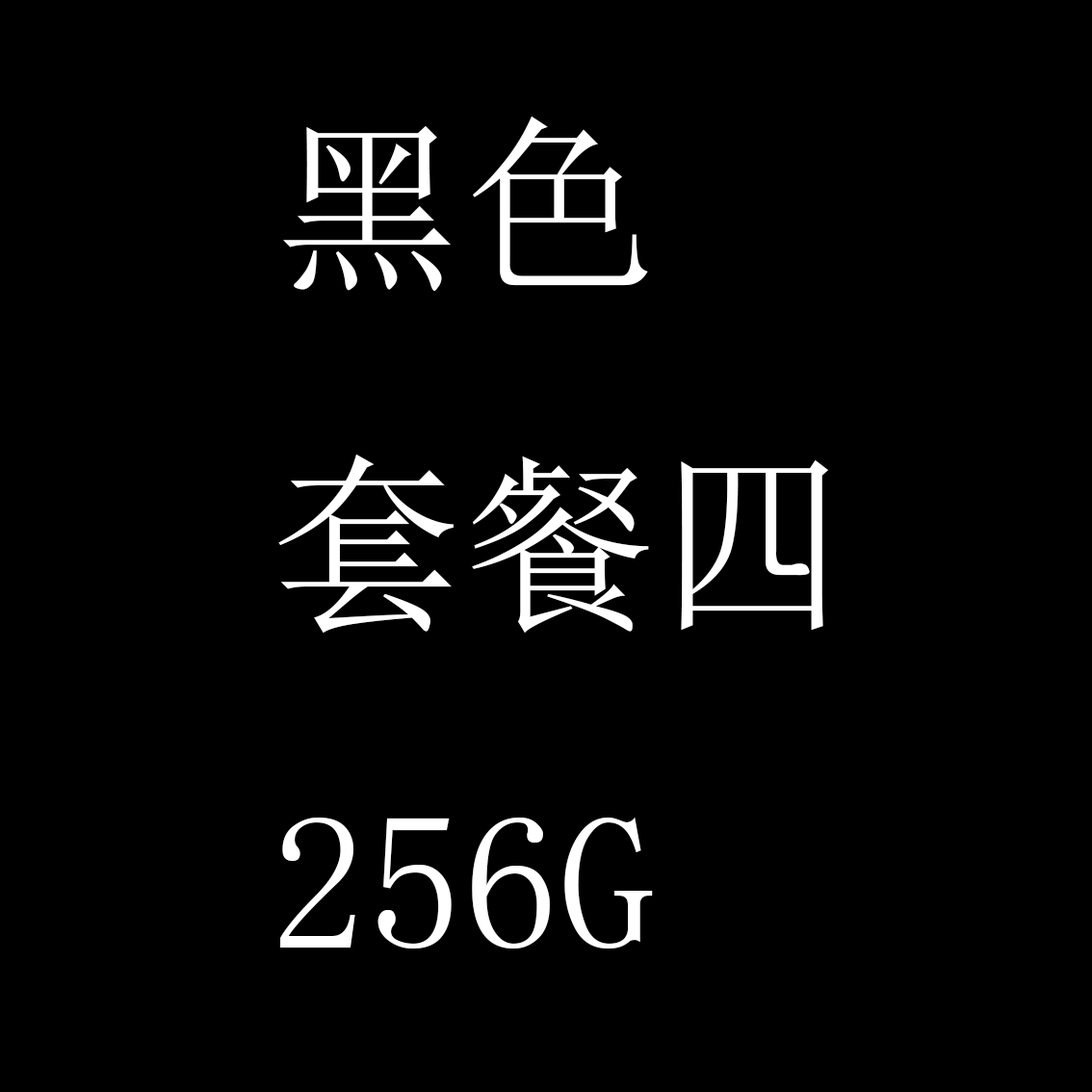
<style>
.page{position:relative;width:1092px;height:1092px;background:#000000}
.page>*{position:absolute;margin:0}
.t1{font:192.6px "SimSun";color:#ffffff}
</style>
<div class="page">
<p class="t1" style="left:278px;top:116px;width:550px;height:833px">黑色<br>套餐四<br>256G</p>
</div>
